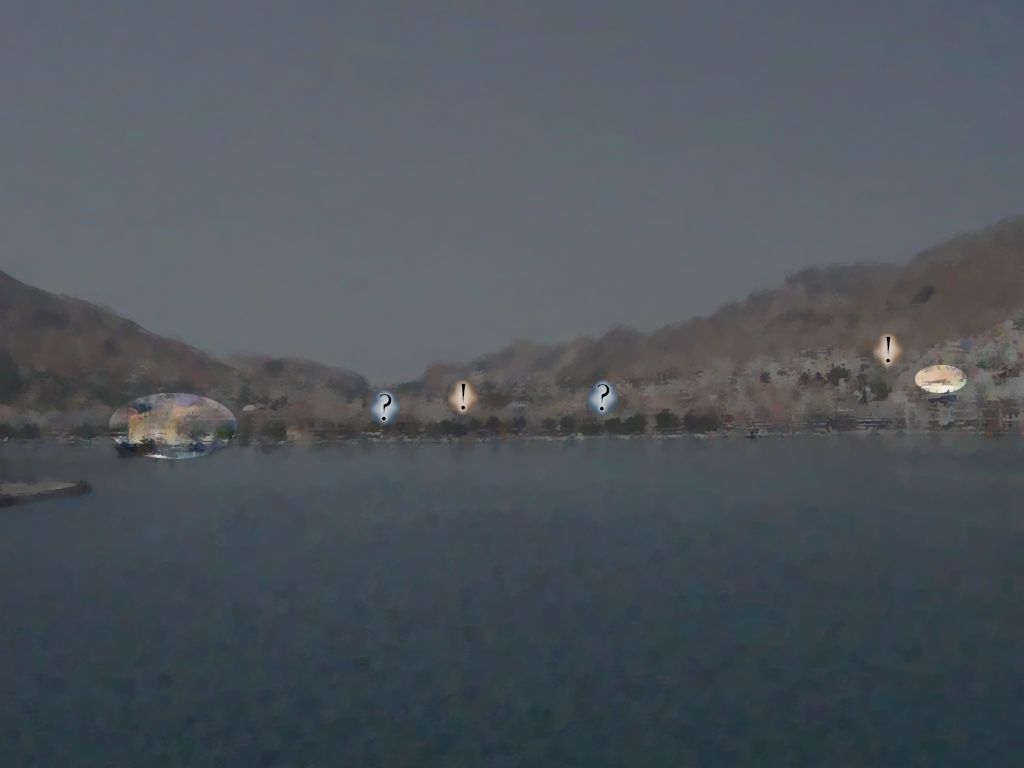
<style>
.page{position:relative;width:1024px;height:768px}
.page>*{position:absolute;margin:0}
.t1{font:35px "FelixTitlingMT";letter-spacing:0.02em;color:#000000}
</style>
<div class="page">
<p class="t1" style="left:460px;top:383px;width:6px;height:27px">!</p>
<p class="t1" style="left:379px;top:394px;width:13px;height:27px">?</p>
</div>
